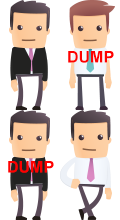
<style>
.page{position:relative;width:120px;height:220px;background:#ffffff}
.page>*{position:absolute;margin:0}
.t1{font:16px "Arial-BoldMT";color:#ff0000}
</style>
<div class="page">
<p class="t1" style="left:68px;top:51px;width:46px;height:12px">DUMP</p>
<p class="t1" style="left:8px;top:161px;width:46px;height:12px">DUMP</p>
</div>
